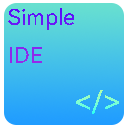
<style>
.page{position:relative;width:128px;height:128px}
.page>*{position:absolute;margin:0}
.t1{font:21.6px "HarmonyOS_Sans_SC"}
.t2{font:32.2px "HarmonyOS_Sans_SC";scale:0.96 1}
</style>
<div class="page">
<p class="t1" style="left:8px;top:8px;width:66px;height:55px">Simple<br>IDE</p>
<p class="t2" style="left:76px;top:90px;width:43px;height:24px">&lt;/&gt;</p>
</div>
